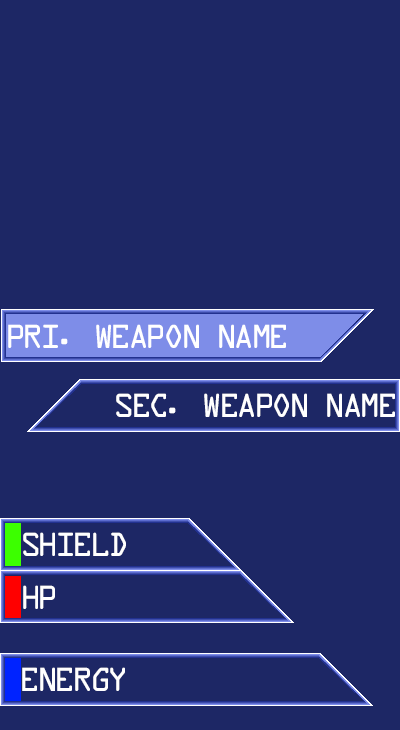
<style>
.page{position:relative;width:400px;height:730px;background:#1d2765}
.page>*{position:absolute;margin:0}
.t1{font:36px "DataControl";color:#ffffff}
</style>
<div class="page">
<p class="t1" style="left:8px;top:324px;width:278px;height:24px">pRI. wEAPON nAME</p>
<p class="t1" style="left:116px;top:393px;width:279px;height:24px">sEC. wEAPON nAME</p>
<p class="t1" style="left:23px;top:532px;width:103px;height:24px">SHIELD</p>
<p class="t1" style="left:23px;top:585px;width:32px;height:24px">HP</p>
<p class="t1" style="left:22px;top:667px;width:103px;height:24px">ENERGY</p>
</div>
